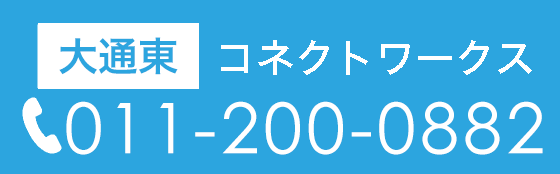
<style>
.page{position:relative;width:560px;height:174px;background:#2ca5df}
.page>*{position:absolute;margin:0}
.t1{font:40px "HiraKakuStd-W6";color:#2ca5df}
.t2{font:40px "HiraKakuStd-W5";color:#ffffff}
.t3{font:70px "CenturyGothic";letter-spacing:0.06em;color:#ffffff}
</style>
<div class="page">
<p class="t1" style="left:59px;top:37px;width:119px;height:38px">大通東</p>
<p class="t2" style="left:221px;top:40px;width:311px;height:35px">コネクトワークス</p>
<p class="t3" style="left:66px;top:101px;width:477px;height:54px">011-200-0882</p>
</div>
